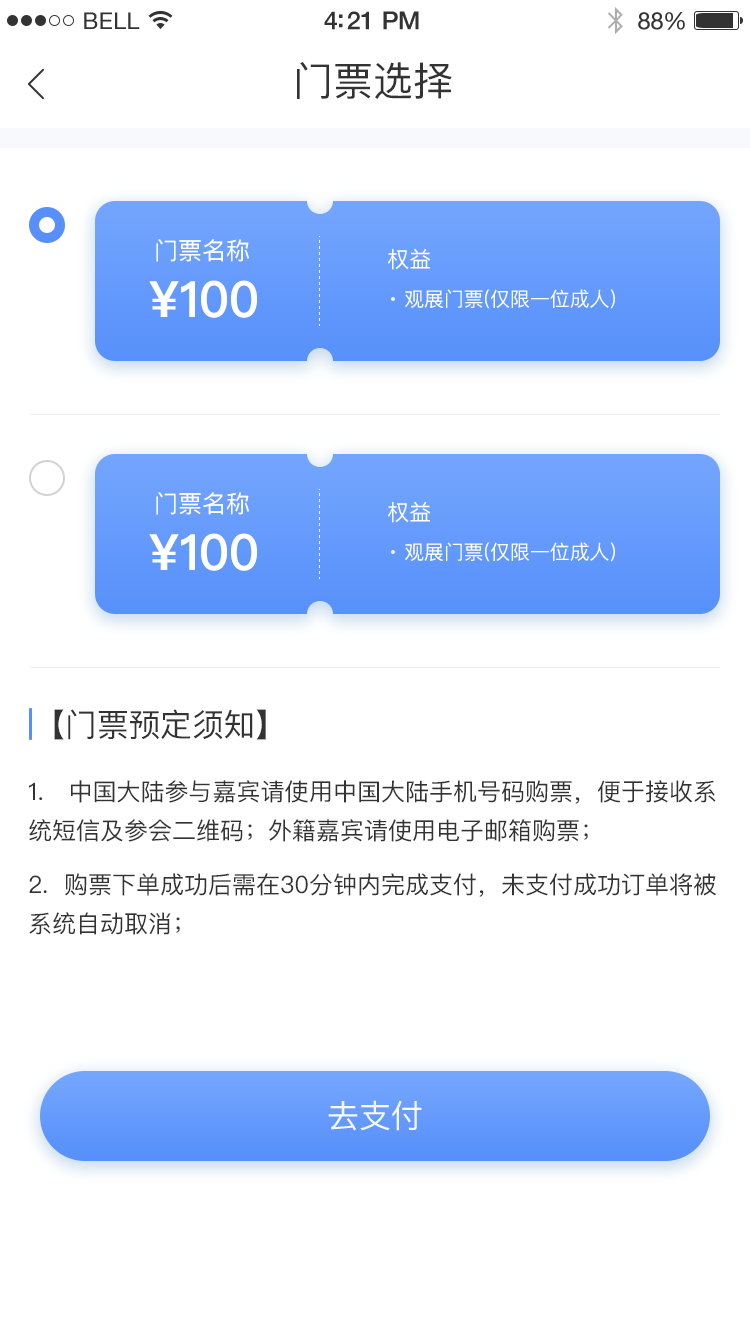
<style>
.page{position:relative;width:750px;height:1334px;background:#ffffff}
.page>*{position:absolute;margin:0}
.t1{font:23px "HelveticaNeue";letter-spacing:0.02em;color:#333333}
.t2{font:25px "HelveticaNeue-Medium";letter-spacing:-0.02em;color:#333333}
.t3{font:24px "HelveticaNeue";letter-spacing:-0.02em;color:#333333}
.t4{font:40px "PingFangSC-Regular";color:#333333}
.t5{font:24px "PingFangSC-Regular";color:#ffffff}
.t6{font:22.1px "PingFangSC-Regular";color:#ffffff;text-transform:uppercase}
.t7{font:50px "PingFangSC-Semibold";color:#ffffff}
.t8{font:20px "PingFangSC-Regular";color:#ffffff;text-transform:uppercase}
.t9{font:32px "PingFangSC-Regular";color:#333333;text-transform:uppercase}
.t10{font:24px/39px "PingFangSC-Regular";color:#333333;text-transform:uppercase}
.t11{font:32px "PingFangSC-Regular";color:#f8f9fc}
</style>
<div class="page">
<p class="t1" style="left:84px;top:12px;width:56px;height:17px">BELL</p>
<p class="t2" style="left:324px;top:11px;width:95px;height:19px">4:21 PM</p>
<p class="t3" style="left:638px;top:12px;width:47px;height:18px">88%</p>
<p class="t4" style="left:297px;top:62px;width:155px;height:38px">门票选择</p>
<p class="t5" style="left:156px;top:239px;width:93px;height:23px">门票名称</p>
<p class="t6" style="left:388px;top:248px;width:42px;height:22px">权益</p>
<p class="t7" style="left:149px;top:280px;width:108px;height:38px">¥100</p>
<p class="t8" style="left:405px;top:289px;width:210px;height:20px">观展门票(仅限一位成人)</p>
<p class="t5" style="left:156px;top:492px;width:93px;height:23px">门票名称</p>
<p class="t6" style="left:388px;top:501px;width:42px;height:22px">权益</p>
<p class="t7" style="left:149px;top:533px;width:108px;height:38px">¥100</p>
<p class="t8" style="left:405px;top:542px;width:210px;height:20px">观展门票(仅限一位成人)</p>
<p class="t9" style="left:54px;top:709px;width:212px;height:31px">【门票预定须知】</p>
<p class="t10" style="left:29px;top:780px;width:688px;height:155px;text-align:justify">1. 中国大陆参与嘉宾请使用中国大陆手机号码购票，便于接收系统短信及参会二维码；外籍嘉宾请使用电子邮箱购票；<br>2. 购票下单成功后需在30分钟内完成支付，未支付成功订单将被系统自动取消；</p>
<p class="t11" style="left:328px;top:1100px;width:94px;height:31px">去支付</p>
</div>
